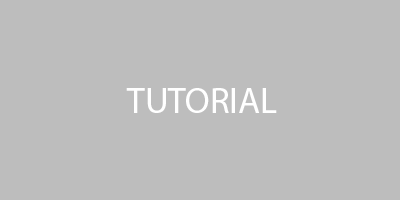
<style>
.page{position:relative;width:400px;height:200px;background:#bdbdbd}
.page>*{position:absolute;margin:0}
.t1{font:36px "MyriadPro-Regular";color:#ffffff}
</style>
<div class="page">
<p class="t1" style="left:126px;top:88px;width:151px;height:25px">TUTORIAL</p>
</div>
